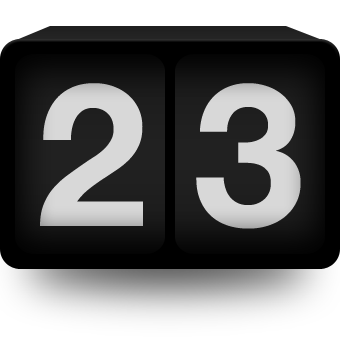
<style>
.page{position:relative;width:340px;height:340px}
.page>*{position:absolute;margin:0}
.t1{font:200px "HelveticaNeue-Bold";color:#d8d8d8}
</style>
<div class="page">
<p class="t1" style="left:40px;top:83px;width:103px;height:143px">2</p>
<p class="t1" style="left:196px;top:83px;width:105px;height:146px">3</p>
</div>
